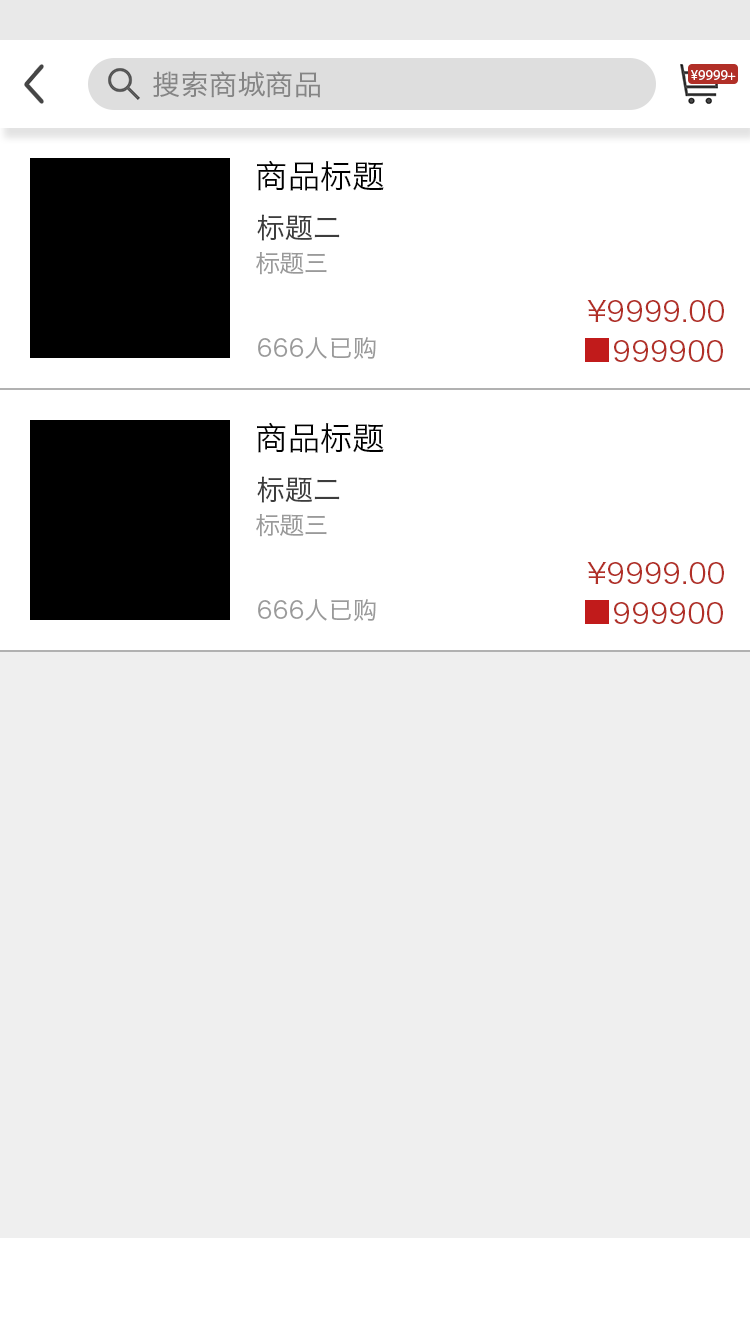
<style>
.page{position:relative;width:750px;height:1334px;background:#efefef}
.page>*{position:absolute;margin:0}
.t1{font:28px "HiraginoSansGB-W3";color:#858585}
.t2{font:14px "MyriadPro-Regular";letter-spacing:0.01em;color:#ffffff}
.t3{font:32px "HiraginoSansGB-W3";color:#000000}
.t4{font:28px "HiraginoSansGB-W3";color:#3d3d3d}
.t5{font:24px "HiraginoSansGB-W3";color:#9a9a9a}
.t6{font:28px "HiraginoSansGB-W3";color:#b12f27}
</style>
<div class="page">
<p class="t1" style="left:153px;top:71px;width:167px;height:27px">搜索商城商品</p>
<p class="t2" style="left:691px;top:70px;width:45px;height:10px">¥9999+</p>
<p class="t3" style="left:257px;top:160px;width:127px;height:31px">商品标题</p>
<p class="t4" style="left:257px;top:214px;width:83px;height:27px">标题二</p>
<p class="t5" style="left:256px;top:252px;width:71px;height:23px">标题三</p>
<p class="t6" style="left:587px;top:300px;width:137px;height:22px">¥9999.00</p>
<p class="t5" style="left:258px;top:337px;width:118px;height:23px">666人已购</p>
<p class="t6" style="left:614px;top:340px;width:109px;height:22px">999900</p>
</div>
